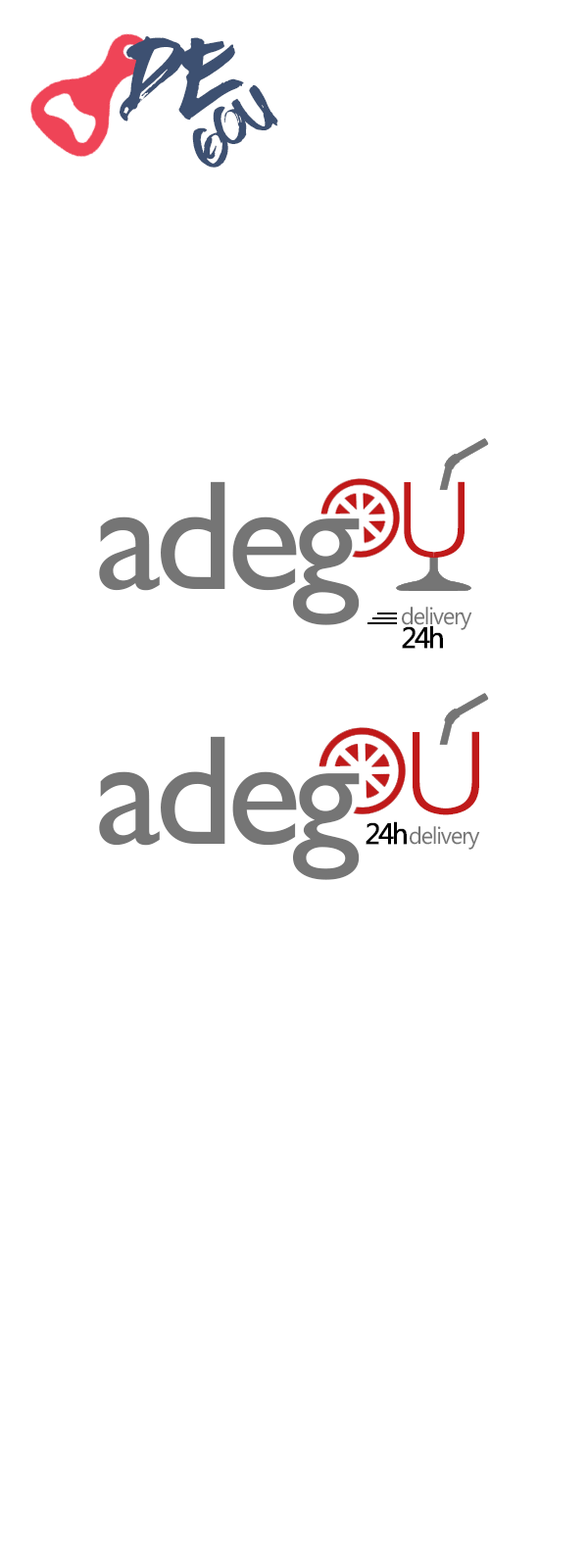
<style>
.page{position:relative;width:588px;height:1568px;background:#ffffff}
.page>*{position:absolute;margin:0}
.t1{font:58.8px "BrushedTraveler";letter-spacing:-0.05em;color:#3d5071}
.t2{font:35.3px "BrushedTraveler";letter-spacing:-0.075em;color:#3d5071}
.t3{font:157px "GillSansMT";letter-spacing:-0.05em;color:#757575}
.t4{font:143.8px "HelveticaNeueLTPro-ThEx";letter-spacing:-0.05em;color:#c01a1a}
.t5{font:143.5px "HelveticaNeueLTPro-ThEx";letter-spacing:-0.05em}
.t6{font:23.5px "MicrosoftPhagsPa";letter-spacing:-0.05em;color:#757575}
.t7{font:29.4px "MicrosoftPhagsPa";letter-spacing:-0.095em;color:#000000;font-weight:bold}
.t8{font:157.4px "HelveticaNeueLTPro-ThEx";letter-spacing:-0.05em}
.t9{font:157px "HelveticaNeueLTPro-ThEx";letter-spacing:-0.05em}
</style>
<div class="page">
<p class="t1" style="left:120px;top:36px;width:124px;height:86px">de</p>
<p class="t2" style="left:192px;top:85px;width:86px;height:83px;rotate:-42deg">GOU</p>
<p class="t3" style="left:99px;top:481px;width:261px;height:144px">adeg</p>
<p class="t4" style="left:393px;top:481px;width:72px;height:78px;rotate:180deg">u</p>
<p class="t5" style="left:404px;top:482px;width:71px;height:77px">u</p>
<p class="t6" style="left:401px;top:607px;width:71px;height:23px">delivery</p>
<p class="t7" style="left:402px;top:625px;width:41px;height:24px">24h</p>
<p class="t3" style="left:99px;top:736px;width:261px;height:144px">adeg</p>
<p class="t8" style="left:401px;top:731px;width:78px;height:84px;rotate:180deg">u</p>
<p class="t9" style="left:413px;top:732px;width:78px;height:83px">u</p>
<p class="t7" style="left:366px;top:821px;width:41px;height:24px">24h</p>
<p class="t6" style="left:409px;top:826px;width:71px;height:24px">delivery</p>
</div>
